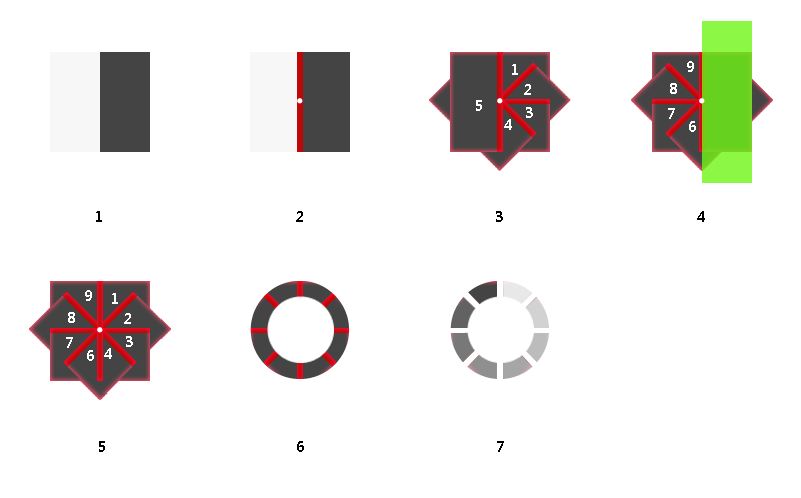
<style>
.page{position:relative;width:801px;height:498px;background:#ffffff}
.page>*{position:absolute;margin:0}
.t1{font:14px "MicrosoftYaHei-Bold";letter-spacing:0.04em;color:#ffffff}
.t2{font:14px "MicrosoftYaHei-Bold";letter-spacing:0.04em;color:#000000}
</style>
<div class="page">
<p class="t1" style="left:512px;top:64px;width:6px;height:11px">1</p>
<p class="t1" style="left:687px;top:61px;width:7px;height:11px">9</p>
<p class="t1" style="left:524px;top:84px;width:7px;height:11px">2</p>
<p class="t1" style="left:670px;top:83px;width:7px;height:11px">8</p>
<p class="t1" style="left:476px;top:100px;width:6px;height:11px">5</p>
<p class="t1" style="left:526px;top:107px;width:7px;height:11px">3</p>
<p class="t1" style="left:668px;top:108px;width:7px;height:11px">7</p>
<p class="t1" style="left:504px;top:119px;width:8px;height:11px">4</p>
<p class="t1" style="left:689px;top:121px;width:7px;height:11px">6</p>
<p class="t2" style="left:96px;top:211px;width:6px;height:11px">1</p>
<p class="t2" style="left:296px;top:211px;width:7px;height:11px">2</p>
<p class="t2" style="left:496px;top:211px;width:7px;height:11px">3</p>
<p class="t2" style="left:697px;top:211px;width:8px;height:11px">4</p>
<p class="t1" style="left:85px;top:290px;width:7px;height:11px">9</p>
<p class="t1" style="left:112px;top:293px;width:6px;height:11px">1</p>
<p class="t1" style="left:68px;top:312px;width:7px;height:11px">8</p>
<p class="t1" style="left:124px;top:313px;width:7px;height:11px">2</p>
<p class="t1" style="left:66px;top:337px;width:7px;height:11px">7</p>
<p class="t1" style="left:126px;top:336px;width:7px;height:11px">3</p>
<p class="t1" style="left:87px;top:350px;width:7px;height:11px">6</p>
<p class="t1" style="left:104px;top:348px;width:8px;height:11px">4</p>
<p class="t2" style="left:99px;top:441px;width:6px;height:11px">5</p>
<p class="t2" style="left:297px;top:441px;width:7px;height:11px">6</p>
<p class="t2" style="left:497px;top:441px;width:7px;height:11px">7</p>
</div>
